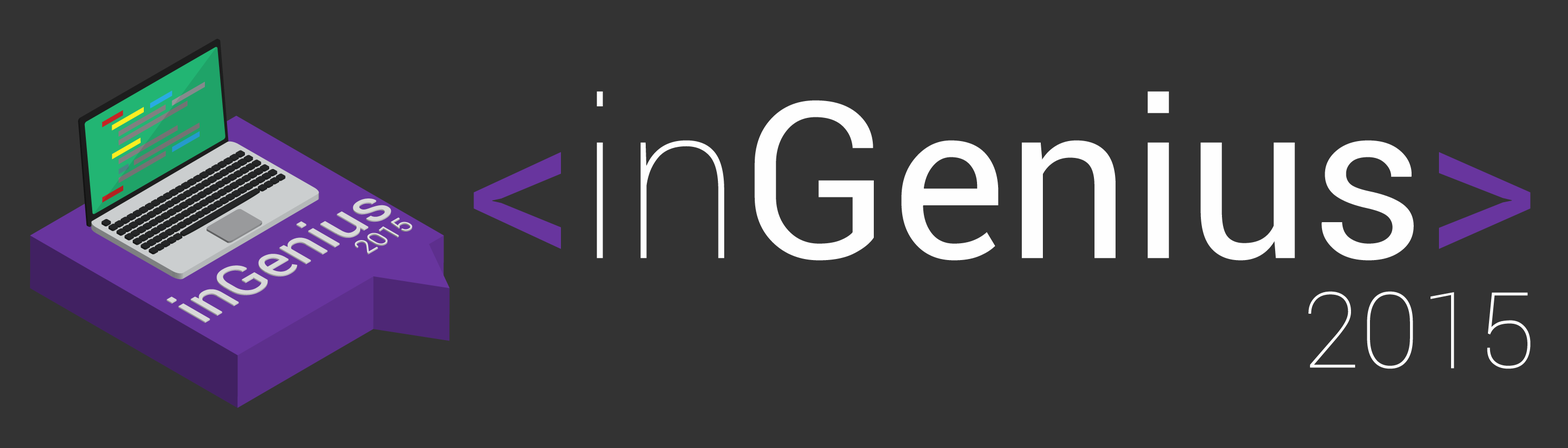
<style>
.page{position:relative;width:1568px;height:448px;background:#333333}
.page>*{position:absolute;margin:0}
.t1{font:218.6px "Roboto-Regular";color:#fefefe}
.t2{font:218.6px "Roboto-Regular";color:#68359e}
.t3{font:218.6px "Roboto-Thin";color:#fefefe}
.t4{font:105.4px "Roboto-Thin";color:#ffffff}
</style>
<div class="page">
<p class="t1" style="left:474px;top:91px;width:1057px;height:170px"><span class="t2">&lt;</span><span class="t3">in</span>Genius<span class="t2">&gt;</span></p>
<p class="t4" style="left:1308px;top:291px;width:223px;height:78px">2015</p>
</div>
